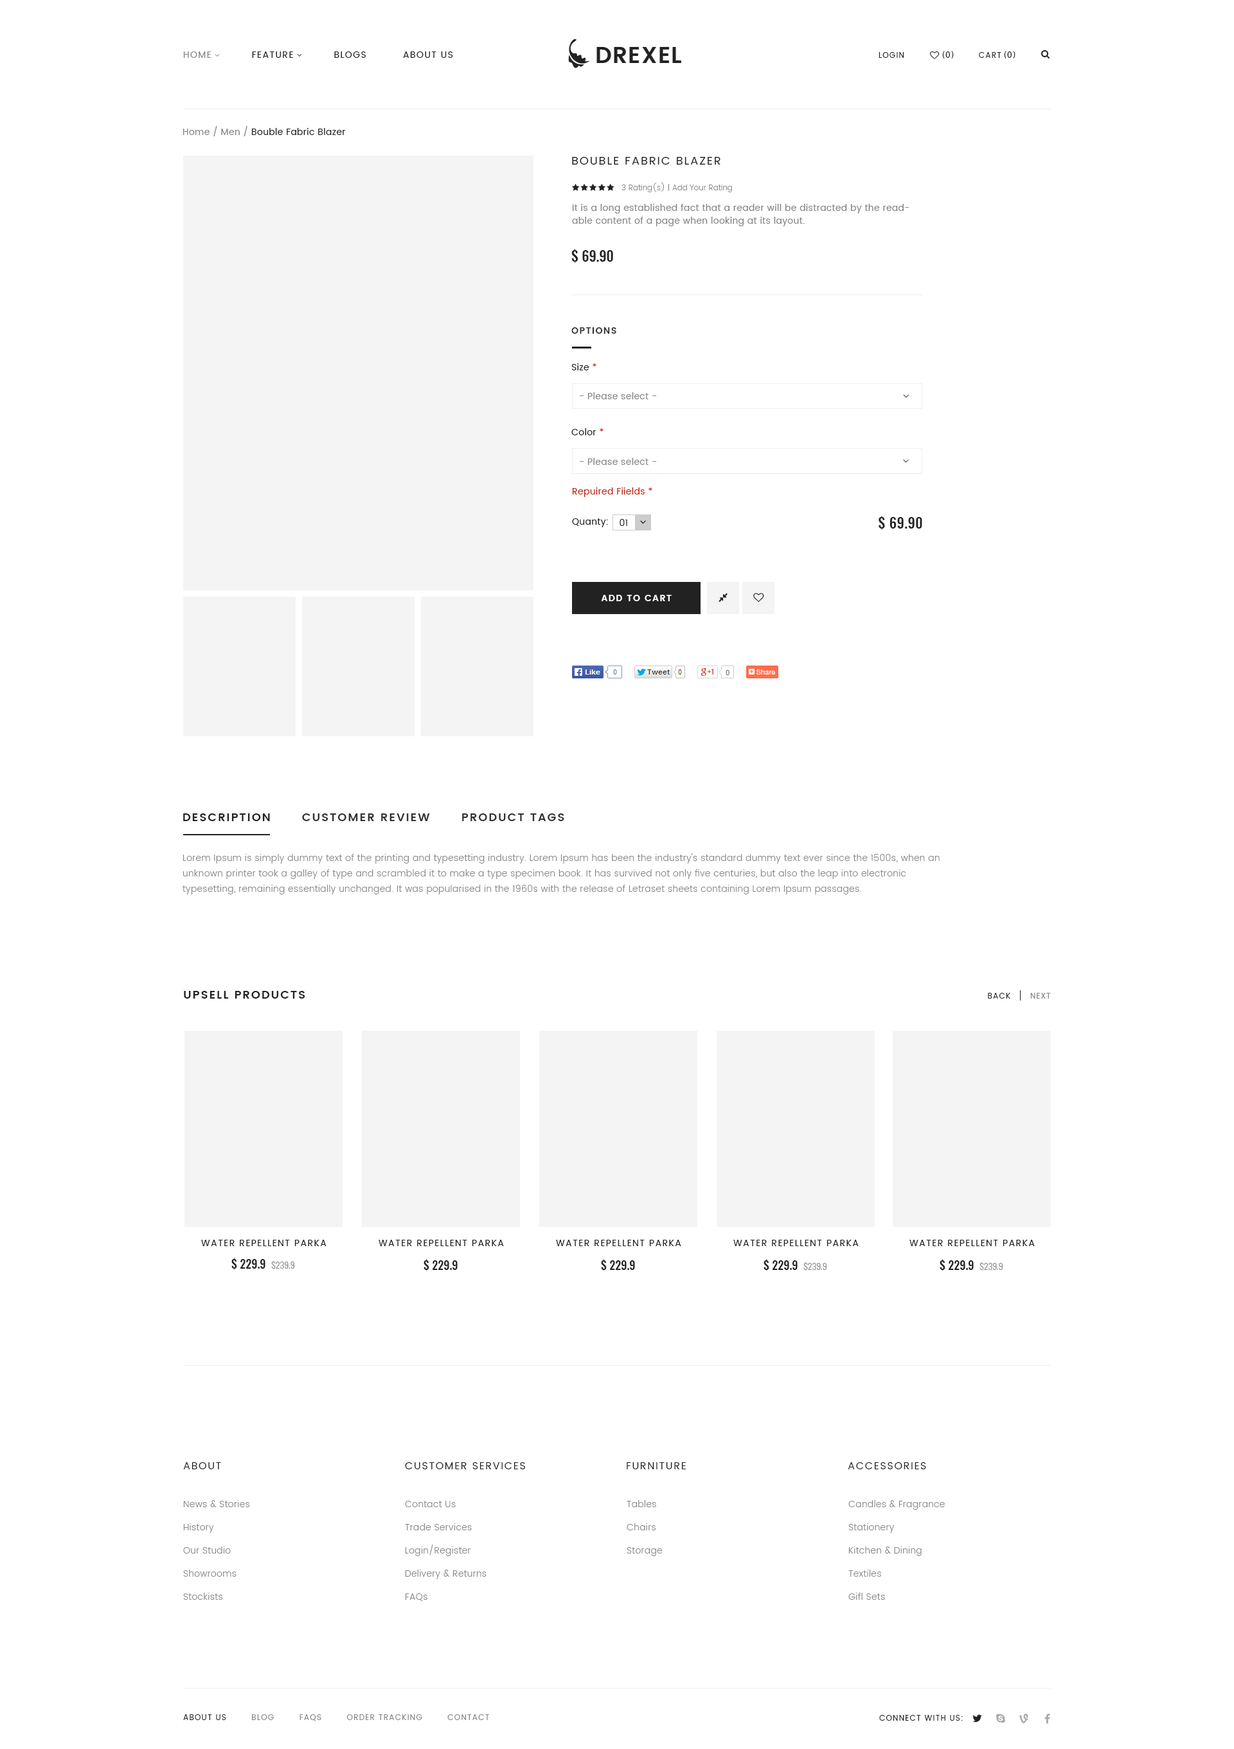
<style>
.page{position:relative;width:1234px;height:1749px;background:#ffffff}
.page>*{position:absolute;margin:0}
.t1{font:9px "Poppins-Regular";letter-spacing:0.1em;color:#222222;text-transform:uppercase}
.t2{font:9px "Poppins-Regular";letter-spacing:0.1em;color:#888888;text-transform:uppercase}
.t3{font:7.7px "Poppins-Regular";letter-spacing:0.1em;color:#222222;text-transform:uppercase}
.t4{font:9px "MyriadPro-Regular";letter-spacing:0.1em;color:#222222;text-transform:uppercase}
.t5{font:9px "Poppins-Regular";letter-spacing:0.025em;color:#222222}
.t6{font:9px "Poppins-Regular";letter-spacing:0.025em;color:#888888}
.t7{font:11.6px "Poppins-Regular";letter-spacing:0.1em;color:#222222;text-transform:uppercase}
.t8{font:7.7px "Poppins-Light";color:#888888}
.t9{font:9px/12.9px "Poppins-Regular";letter-spacing:0.025em;color:#888888}
.t10{font:14.1px "Oswald-Medium";color:#222222}
.t11{font:9px "Poppins-SemiBold";letter-spacing:0.1em;color:#333333;text-transform:uppercase}
.t12{font:9px "Poppins-Regular";letter-spacing:0.025em;color:#c22312}
.t13{font:9px "Poppins-Regular";color:#222222}
.t14{font:14.1px "Oswald-Medium";letter-spacing:0.025em;color:#222222}
.t15{font:9px "Poppins-SemiBold";letter-spacing:0.1em;color:#ffffff;text-transform:uppercase}
.t16{font:11.6px "Poppins-SemiBold";letter-spacing:0.1em;color:#222222;text-transform:uppercase}
.t17{font:11.6px "Poppins-SemiBold";letter-spacing:0.1em;color:#333333;text-transform:uppercase}
.t18{font:9px/15.4px "Poppins-Light";letter-spacing:0.025em;color:#888888}
.t19{font:7.7px "MyriadPro-Regular";letter-spacing:0.1em;color:#888888;text-transform:uppercase}
.t20{font:7.7px "Poppins-Regular";letter-spacing:0.1em;color:#888888;text-transform:uppercase}
.t21{font:11.6px "Oswald-Medium";color:#222222}
.t22{font:9px "Oswald-Light";color:#888888}
.t23{font:10.3px "Poppins-Regular";letter-spacing:0.1em;color:#222222;text-transform:uppercase}
.t24{font:9px/23.1px "Poppins-Light";letter-spacing:0.025em;color:#888888}
</style>
<div class="page">
<p class="t1" style="left:183px;top:51px;width:270px;height:7px"><span class="t2">Home</span>           Feature           Blogs          About Us</p>
<p class="t3" style="left:879px;top:52px;width:26px;height:6px">Login</p>
<p class="t4" style="left:942px;top:51px;width:12px;height:8px">(0)</p>
<p class="t3" style="left:979px;top:52px;width:23px;height:6px">Cart</p>
<p class="t4" style="left:1004px;top:51px;width:12px;height:8px">(0)</p>
<p class="t5" style="left:183px;top:126px;width:162px;height:10px"><span class="t6">Home / Men / </span>Bouble Fabric Blazer</p>
<p class="t7" style="left:572px;top:157px;width:149px;height:8px">Bouble Fabric Blazer</p>
<p class="t8" style="left:622px;top:182px;width:110px;height:10px">3 Rating(s) | Add Your Rating</p>
<p class="t9" style="left:572px;top:204px;width:338px;height:22px">It is a long established fact that a reader will be distracted by the readable content of a page when looking at its layout.</p>
<p class="t10" style="left:572px;top:249px;width:41px;height:14px">$ 69.90</p>
<p class="t11" style="left:572px;top:327px;width:44px;height:7px">Options</p>
<p class="t5" style="left:572px;top:363px;width:25px;height:7px">Size <span class="t12">*</span></p>
<p class="t6" style="left:580px;top:392px;width:76px;height:7px">- Please select -</p>
<p class="t5" style="left:572px;top:428px;width:32px;height:7px">Color <span class="t12">*</span></p>
<p class="t6" style="left:580px;top:458px;width:76px;height:7px">- Please select -</p>
<p class="t12" style="left:572px;top:487px;width:80px;height:10px">Repuired Fiields *</p>
<p class="t5" style="left:572px;top:518px;width:36px;height:9px">Quanty:</p>
<p class="t13" style="left:620px;top:519px;width:7px;height:7px">01</p>
<p class="t14" style="left:879px;top:516px;width:44px;height:14px">$ 69.90</p>
<p class="t15" style="left:601px;top:595px;width:71px;height:6px">Add to cart</p>
<p class="t16" style="left:183px;top:813px;width:87px;height:8px">Description</p>
<p class="t17" style="left:302px;top:813px;width:128px;height:8px">Customer Review</p>
<p class="t17" style="left:462px;top:813px;width:102px;height:8px">Product Tags</p>
<p class="t18" style="left:183px;top:853px;width:757px;height:41px;text-align:justify">Lorem Ipsum is simply dummy text of the printing and typesetting industry. Lorem Ipsum has been the industry's standard dummy text ever since the 1500s, when an<br>unknown printer took a galley of type and scrambled it to make a type specimen book. It has survived not only five centuries, but also the leap into electronic<br>typesetting, remaining essentially unchanged. It was popularised in the 1960s with the release of Letraset sheets containing Lorem Ipsum passages.</p>
<p class="t16" style="left:184px;top:991px;width:121px;height:7px">UPsell Products</p>
<p class="t3" style="left:988px;top:993px;width:23px;height:5px">Back</p>
<p class="t19" style="left:1030px;top:993px;width:21px;height:5px"><span class="t20">N</span>ext</p>
<p class="t1" style="left:201px;top:1239px;width:126px;height:7px">Water Repellent Parka</p>
<p class="t1" style="left:379px;top:1239px;width:125px;height:7px">Water Repellent Parka</p>
<p class="t1" style="left:556px;top:1239px;width:125px;height:7px">Water Repellent Parka</p>
<p class="t1" style="left:734px;top:1239px;width:125px;height:7px">Water Repellent Parka</p>
<p class="t1" style="left:910px;top:1239px;width:125px;height:7px">Water Repellent Parka</p>
<p class="t21" style="left:231px;top:1257px;width:64px;height:13px">$ 229.9  <span class="t22">$239.9</span></p>
<p class="t21" style="left:424px;top:1259px;width:34px;height:12px">$ 229.9</p>
<p class="t21" style="left:601px;top:1259px;width:34px;height:12px">$ 229.9</p>
<p class="t21" style="left:764px;top:1259px;width:63px;height:12px">$ 229.9  <span class="t22">$239.9</span></p>
<p class="t21" style="left:940px;top:1259px;width:64px;height:12px">$ 229.9  <span class="t22">$239.9</span></p>
<p class="t23" style="left:183px;top:1462px;width:38px;height:7px">About</p>
<p class="t23" style="left:405px;top:1462px;width:120px;height:7px">Customer services</p>
<p class="t23" style="left:627px;top:1462px;width:59px;height:7px">Furniture</p>
<p class="t23" style="left:848px;top:1462px;width:78px;height:7px">Accessories</p>
<p class="t24" style="left:183px;top:1500px;width:66px;height:99px">News &amp; Stories<br>History<br>Our Studio<br>Showrooms<br>Stockists</p>
<p class="t24" style="left:405px;top:1500px;width:82px;height:101px">Contact Us<br>Trade Services<br>Login/Register<br>Delivery &amp; Returns<br>FAQs</p>
<p class="t24" style="left:627px;top:1500px;width:35px;height:56px">Tables<br>Chairs<br>Storage</p>
<p class="t24" style="left:849px;top:1500px;width:96px;height:99px">Candles &amp; Fragrance<br>Stationery<br>Kitchen &amp; Dining<br>Textiles<br>Gifl Sets</p>
<p class="t20" style="left:183px;top:1714px;width:306px;height:7px"><span class="t3">About Us</span>        Blog        FAQs        Order Tracking        Contact</p>
<p class="t3" style="left:879px;top:1715px;width:84px;height:5px">Connect with us:</p>
</div>
